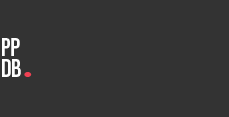
<style>
.page{position:relative;width:229px;height:117px;background:#333333}
.page>*{position:absolute;margin:0}
.t1{font:25.3px "BebasNeue-Regular";color:#ffffff}
.t2{font:62.3px "TimesNewRomanPSMT";color:#ef4153}
</style>
<div class="page">
<p class="t1" style="left:2px;top:38px;width:18px;height:18px">PP</p>
<p class="t1" style="left:2px;top:59px;width:19px;height:18px">DB</p>
<p class="t2" style="left:24px;top:72px;width:8px;height:5px">.</p>
</div>
